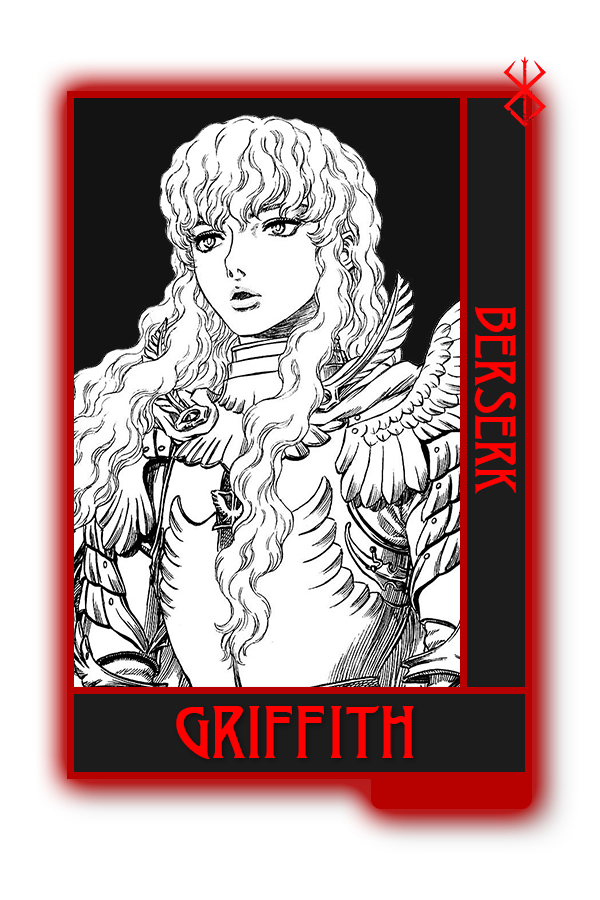
<style>
.page{position:relative;width:600px;height:900px;background:#ffffff}
.page>*{position:absolute;margin:0}
.t1{font:58.3px "QuaintGothicSGOT-Regular";color:#ff0000}
.t2{font:75px "QuaintGothicSGOT-Regular";color:#ff0000}
</style>
<div class="page">
<p class="t1" style="left:474px;top:307px;width:42px;height:187px;rotate:90deg">BERSERK</p>
<p class="t2" style="left:176px;top:706px;width:238px;height:53px">GRIFFITH</p>
</div>
